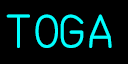
<style>
.page{position:relative;width:128px;height:64px;background:#000000}
.page>*{position:absolute;margin:0}
.t1{font:44px "FBW-Display-EIS-A320";color:#00ffff}
</style>
<div class="page">
<p class="t1" style="left:6px;top:14px;width:106px;height:34px">TOGA</p>
</div>
